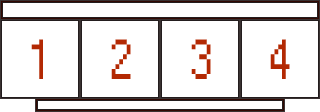
<style>
.page{position:relative;width:320px;height:112px;background:#ffffff}
.page>*{position:absolute;margin:0}
.t1{font:52.7px "Small Fonts";letter-spacing:0.015em;color:#b32903;scale:0.91 1}
</style>
<div class="page">
<p class="t1" style="left:31px;top:39px;width:12px;height:40px">1</p>
<p class="t1" style="left:111px;top:39px;width:20px;height:40px">2</p>
<p class="t1" style="left:191px;top:39px;width:20px;height:40px">3</p>
<p class="t1" style="left:270px;top:39px;width:20px;height:40px">4</p>
</div>
